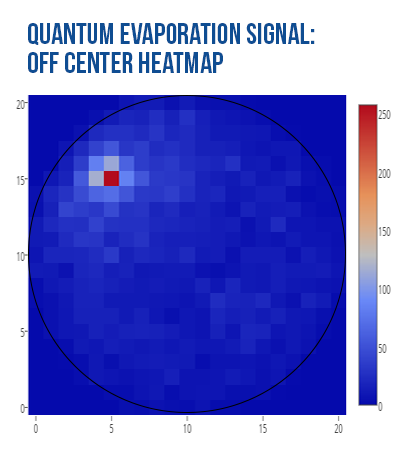
<style>
.page{position:relative;width:404px;height:458px;background:#ffffff}
.page>*{position:absolute;margin:0}
.t1{font:30px/217px "BebasNeue";color:#0f4d92}
.t2{font:30px/29px "BebasNeue";color:#0f4d92}
</style>
<div class="page">
<p class="t1" style="left:28px;top:23px;width:287px;height:50px">Quantum Evaporation Signal:<br><span class="t2">Off Center Heatmap</span></p>
</div>
